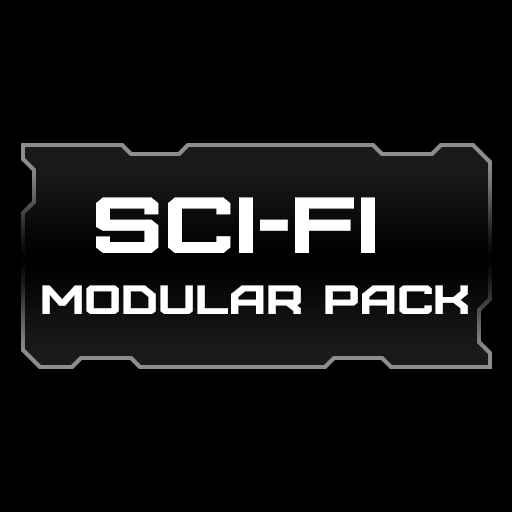
<style>
.page{position:relative;width:512px;height:512px;background:#000000}
.page>*{position:absolute;margin:0}
.t1{font:40.8px "Furore";color:#ffffff;scale:1.25 1}
.t2{font:79.4px "Furore";color:#ffffff;scale:1.25 1}
</style>
<div class="page">
<p class="t1" style="left:42px;top:197px;width:426px;height:117px;text-align:center"><span class="t2">sci-fi <br></span>modular pack</p>
</div>
